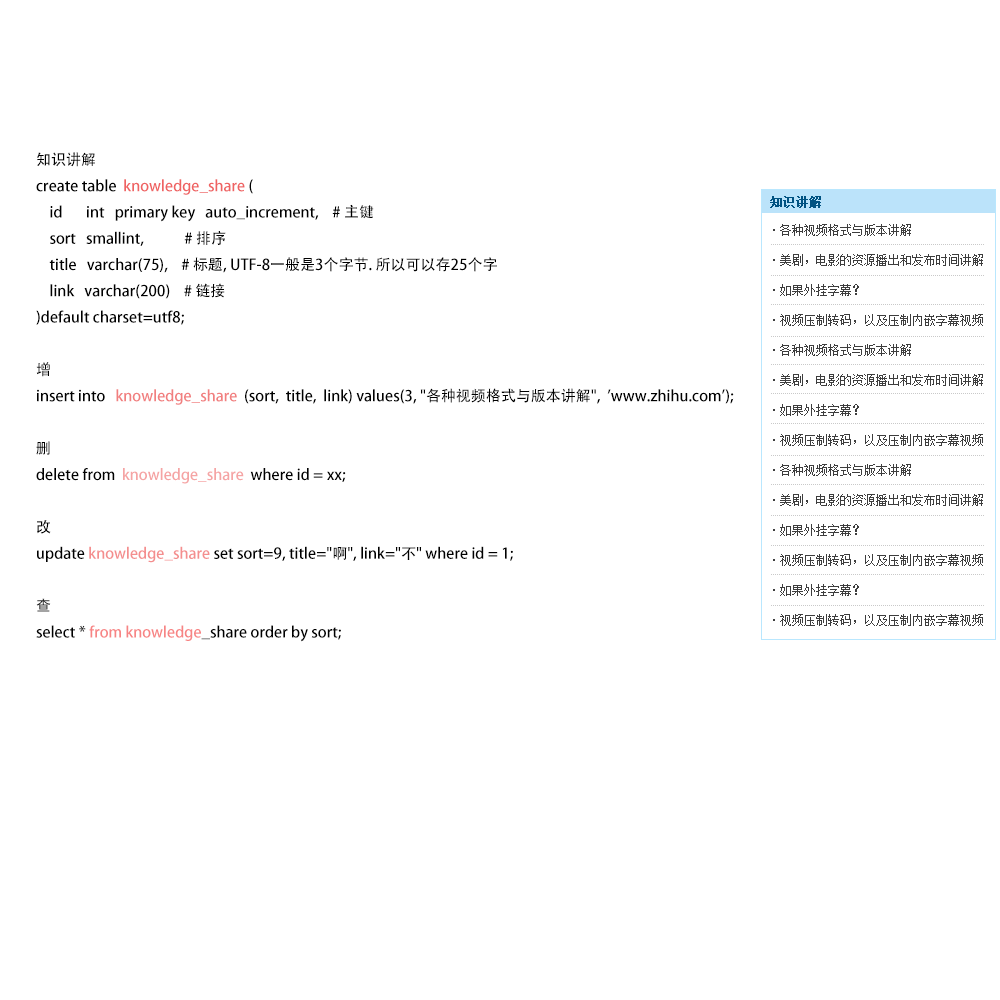
<style>
.page{position:relative;width:1000px;height:1000px;background:#ffffff}
.page>*{position:absolute;margin:0}
.t1{font:15px "AdobeHeitiStd-Regular";color:#000000}
.t2{font:15px "AdobeHeitiStd-Regular";color:#ef6363}
.t3{font:15px "AdobeHeitiStd-Regular";color:#f17f7f}
.t4{font:15px "AdobeHeitiStd-Regular";color:#f5a4a4}
.t5{font:15px "AdobeHeitiStd-Regular";color:#f48e8e}
.t6{font:15px "AdobeHeitiStd-Regular";color:#f78484}
.t7{font:12px "NSimSun";color:#005281;font-weight:bold}
.t8{font:12px/30px "NSimSun";color:#3d3d3d}
</style>
<div class="page">
<p class="t1" style="left:36px;top:152px;width:698px;height:490px">知识讲解<br>create table  <span class="t2">knowledge_share</span> (<br>    id       int   primary key   auto_increment,    # 主键<br>    sort   smallint,            # 排序<br>    title   varchar(75),    # 标题, UTF-8一般是3个字节. 所以可以存25个字<br>    link   varchar(200)    # 链接<br>)default charset=utf8;<br><br>增<br>insert into   <span class="t3">knowledge_share</span>  (sort,  title,  link) values(3, "各种视频格式与版本讲解",  'www.zhihu.com');<br><br>删<br>delete from  <span class="t4">knowledge_share</span>  where id = xx;<br><br>改<br>update <span class="t5">knowledge_share </span>set sort=9, title="啊", link="不" where id = 1;<br><br>查<br>select * <span class="t6">from knowledge</span>_share order by sort;</p>
<p class="t7" style="left:770px;top:196px;width:51px;height:12px">知识讲解</p>
<p class="t8" style="left:773px;top:224px;width:210px;height:402px">·各种视频格式与版本讲解<br>·美剧，电影的资源播出和发布时间讲解<br>·如果外挂字幕？<br>·视频压制转码，以及压制内嵌字幕视频<br>·各种视频格式与版本讲解<br>·美剧，电影的资源播出和发布时间讲解<br>·如果外挂字幕？<br>·视频压制转码，以及压制内嵌字幕视频<br>·各种视频格式与版本讲解<br>·美剧，电影的资源播出和发布时间讲解<br>·如果外挂字幕？<br>·视频压制转码，以及压制内嵌字幕视频<br>·如果外挂字幕？<br>·视频压制转码，以及压制内嵌字幕视频</p>
</div>
